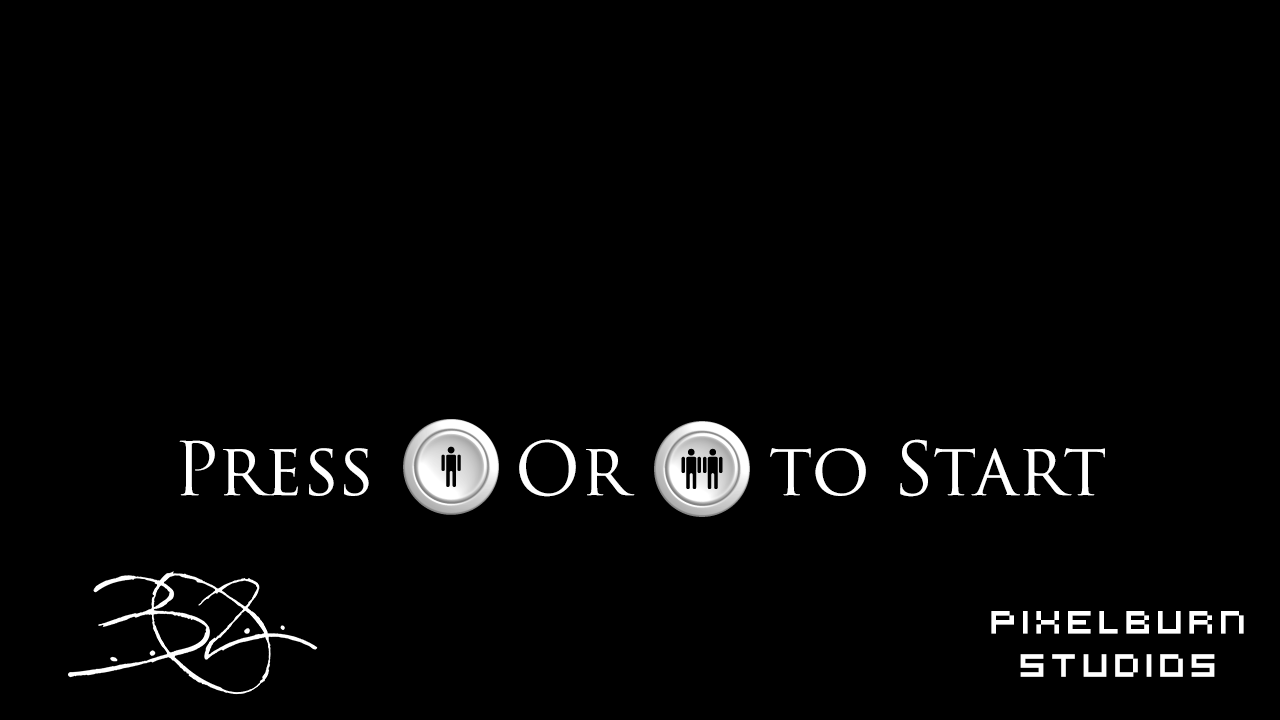
<style>
.page{position:relative;width:1280px;height:720px;background:#000000}
.page>*{position:absolute;margin:0}
.t1{font:72px "TrajanPro3-Regular";color:#ffffff}
.t2{font:36px "VirtualDJ";color:#ffffff}
</style>
<div class="page">
<p class="t1" style="left:179px;top:439px;width:926px;height:58px">Press      Or      to Start</p>
<p class="t2" style="left:991px;top:611px;width:253px;height:66px;text-align:center">PixelBurn Studios</p>
</div>
